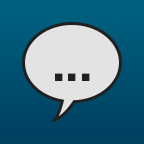
<style>
.page{position:relative;width:144px;height:144px;background:#e3e3e3}
.page>*{position:absolute;margin:0}
.t1{font:48px "HelveticaNeue-Bold";color:#202020}
</style>
<div class="page">
<p class="t1" style="left:55px;top:73px;width:35px;height:8px">...</p>
</div>
